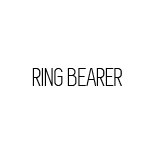
<style>
.page{position:relative;width:156px;height:153px;background:#ffffff}
.page>*{position:absolute;margin:0}
.t1{font:27px "Simplifica";color:#000000}
.t2{font:17px "Glamor-BoldCondensedItalic";color:#000000}
</style>
<div class="page">
<p class="t1" style="left:32px;top:68px;width:90px;height:18px"><span class="t2"><br></span>RING BEARER</p>
</div>
